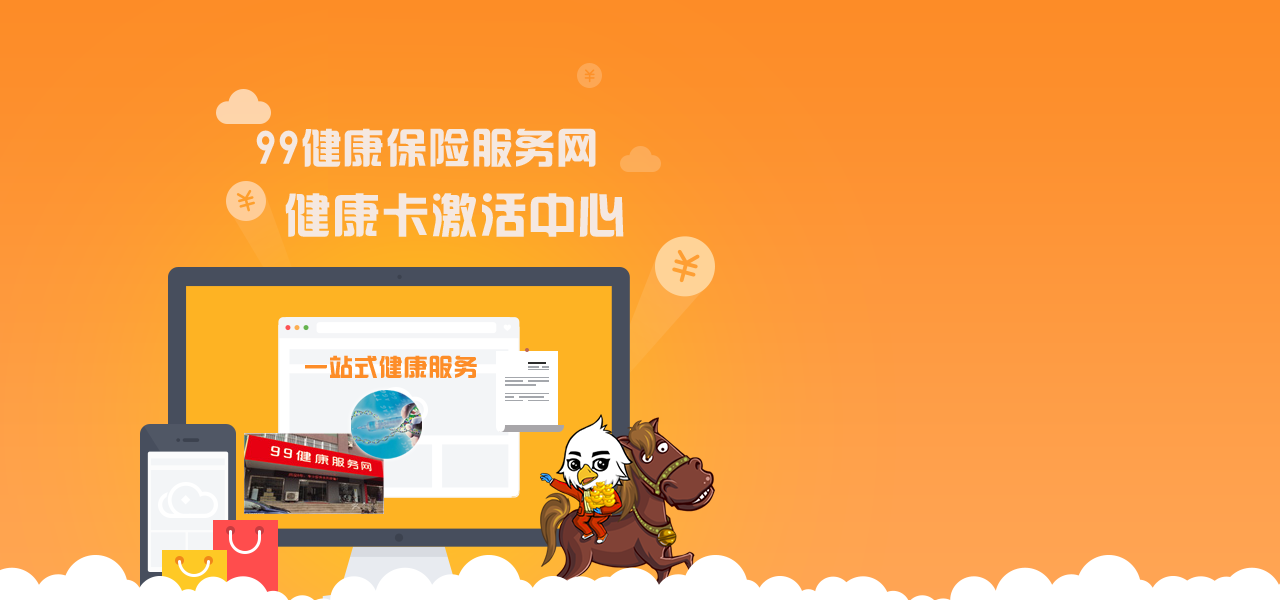
<style>
.page{position:relative;width:1280px;height:600px}
.page>*{position:absolute;margin:0}
.t1{font:41.1px "¹ã½Ý¾ÓÃÔÄã×Ö¿â";letter-spacing:0.04em;color:#f5e8e0}
.t2{font:47.1px "¹ã½Ý¾ÓÃÔÄã×Ö¿â";letter-spacing:0.04em;color:#f5e8e0}
.t3{font:24px "¹ã½Ý¾ÓÃÔÄã×Ö¿â";letter-spacing:0.04em;color:#fd8d28}
</style>
<div class="page">
<p class="t1" style="left:256px;top:128px;width:340px;height:39px">99健康保险服务网</p>
<p class="t2" style="left:285px;top:193px;width:339px;height:44px">健康卡激活中心</p>
<p class="t3" style="left:305px;top:355px;width:172px;height:23px">一站式健康服务</p>
</div>
